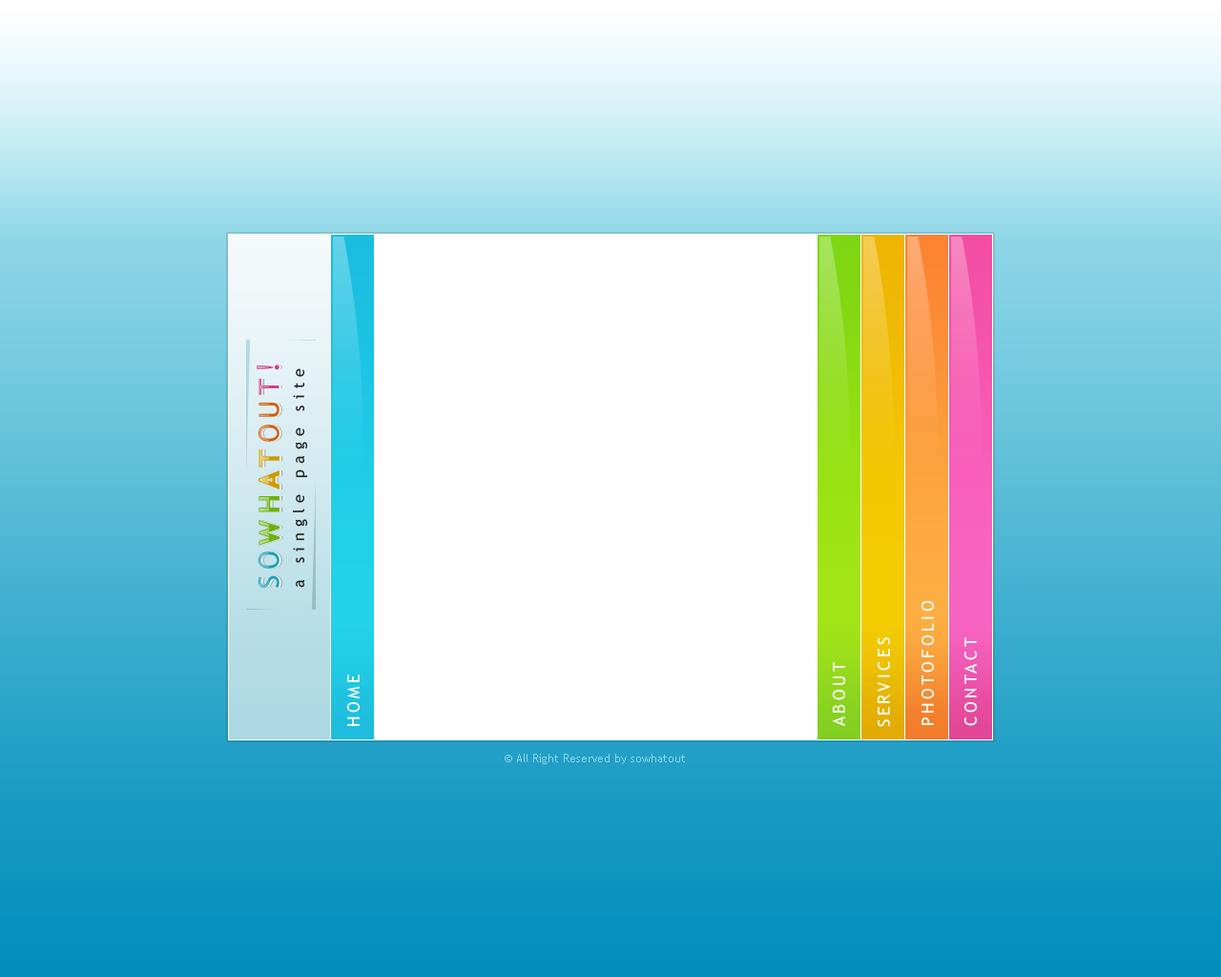
<style>
.page{position:relative;width:1221px;height:977px;background:#ffffff}
.page>*{position:absolute;margin:0}
.t1{font:40.1px "TrebuchetMS";letter-spacing:0.2em;font-variant:small-caps}
.t2{font:40.1px "TrebuchetMS-Bold";letter-spacing:0.2em;font-variant:small-caps;font-weight:bold}
.t3{font:30.5px "TrebuchetMS";letter-spacing:0.2em;font-variant:small-caps}
.t4{font:15.3px "TrebuchetMS";letter-spacing:0.389em;color:#1d1d1d}
.t5{font:23.8px "TrebuchetMS";letter-spacing:0.2em;color:#ffffff;font-variant:small-caps}
.t6{font:11.4px "TrebuchetMS";color:#8cd5e6}
</style>
<div class="page">
<p class="t1" style="left:257px;top:364px;width:23px;height:224px;rotate:-90deg">so<span class="t2">wh</span><span class="t2">at</span>out<span class="t3">!</span></p>
<p class="t2" style="left:258px;top:364px;width:24px;height:224px;rotate:-90deg"><span class="t1">so</span>what<span class="t1">out</span><span class="t3">!</span></p>
<p class="t2" style="left:259px;top:364px;width:24px;height:224px;rotate:-90deg"><span class="t1">so</span>what<span class="t1">out</span><span class="t3">!</span></p>
<p class="t4" style="left:293px;top:368px;width:15px;height:220px;rotate:-90deg">a single page site</p>
<p class="t5" style="left:920px;top:600px;width:15px;height:125px;rotate:-90deg">photofolio</p>
<p class="t5" style="left:877px;top:637px;width:14px;height:90px;rotate:-90deg">services</p>
<p class="t5" style="left:963px;top:637px;width:15px;height:89px;rotate:-90deg">contact</p>
<p class="t5" style="left:832px;top:662px;width:14px;height:64px;rotate:-90deg">about</p>
<p class="t5" style="left:346px;top:674px;width:15px;height:52px;rotate:-90deg">home</p>
<p class="t6" style="left:505px;top:754px;width:180px;height:10px">© All Right Reserved by sowhatout</p>
</div>
